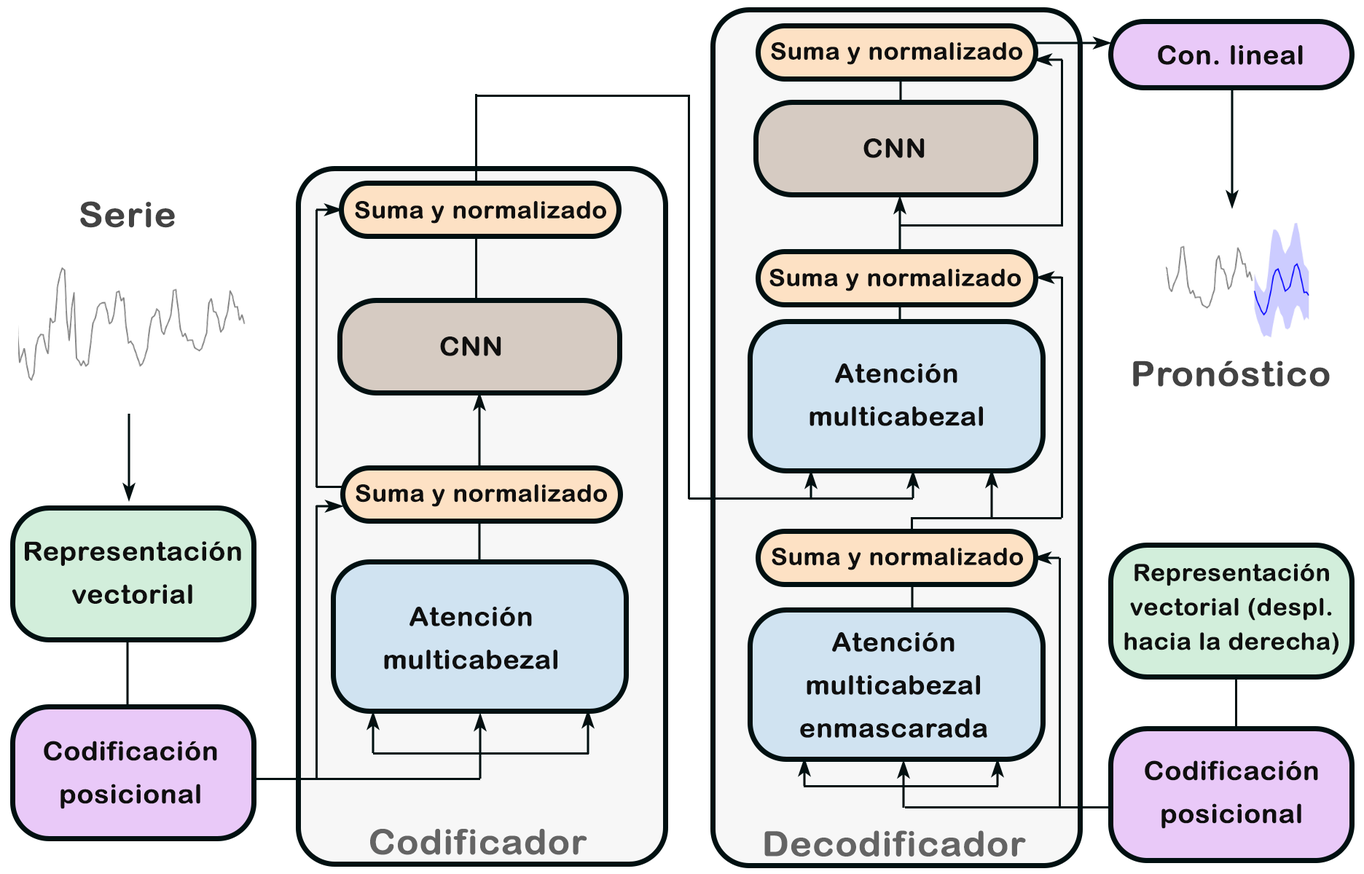
<style>
.page{position:relative;width:1364px;height:874px;background:#ffffff}
.page>*{position:absolute;margin:0}
.t1{font:23.2px "ArialRoundedMTBold";color:#0f0f0f;font-weight:bold;scale:1.06 1}
.t2{font:25.8px "ArialRoundedMTBold";color:#0f0f0f;font-weight:bold;scale:1.06 1}
.t3{font:34.4px "ArialRoundedMTBold";color:#434343;font-weight:bold;scale:1.06 1}
.t4{font:25.8px/43px "ArialRoundedMTBold";color:#0f0f0f;font-weight:bold;scale:1.06 1}
.t5{font:23.2px/34.4px "ArialRoundedMTBold";color:#0f0f0f;font-weight:bold;scale:1.06 1}
.t6{font:34.4px "ArialRoundedMTBold";color:#646464;font-weight:bold;scale:1.06 1}
</style>
<div class="page">
<p class="t1" style="left:771px;top:42px;width:251px;height:23px">Suma y normalizado</p>
<p class="t2" style="left:1158px;top:45px;width:145px;height:20px">Con. lineal</p>
<p class="t2" style="left:863px;top:138px;width:62px;height:20px">CNN</p>
<p class="t3" style="left:80px;top:201px;width:95px;height:27px">Serie</p>
<p class="t1" style="left:355px;top:201px;width:251px;height:23px">Suma y normalizado</p>
<p class="t1" style="left:769px;top:269px;width:252px;height:22px">Suma y normalizado</p>
<p class="t2" style="left:440px;top:337px;width:61px;height:19px">CNN</p>
<p class="t4" style="left:809px;top:364px;width:174px;height:62px;text-align:center">Atención<br>multicabezal</p>
<p class="t3" style="left:1133px;top:361px;width:197px;height:26px">Pronóstico</p>
<p class="t1" style="left:356px;top:485px;width:251px;height:22px">Suma y normalizado</p>
<p class="t4" style="left:25px;top:541px;width:216px;height:63px;text-align:center">Representación<br>vectorial</p>
<p class="t1" style="left:772px;top:548px;width:251px;height:22px">Suma y normalizado</p>
<p class="t5" style="left:1124px;top:564px;width:214px;height:91px;text-align:center">Representación<br>vectorial (despl.<br>hacia la derecha)</p>
<p class="t4" style="left:384px;top:607px;width:173px;height:63px;text-align:center">Atención<br>multicabezal</p>
<p class="t4" style="left:800px;top:632px;width:187px;height:106px;text-align:center">Atención<br>multicabezal<br>enmascarada</p>
<p class="t4" style="left:44px;top:741px;width:173px;height:68px;text-align:center">Codificación<br>posicional</p>
<p class="t4" style="left:1145px;top:761px;width:173px;height:68px;text-align:center">Codificación<br>posicional</p>
<p class="t6" style="left:370px;top:829px;width:217px;height:26px">Codificador</p>
<p class="t6" style="left:764px;top:831px;width:262px;height:26px">Decodificador</p>
</div>
